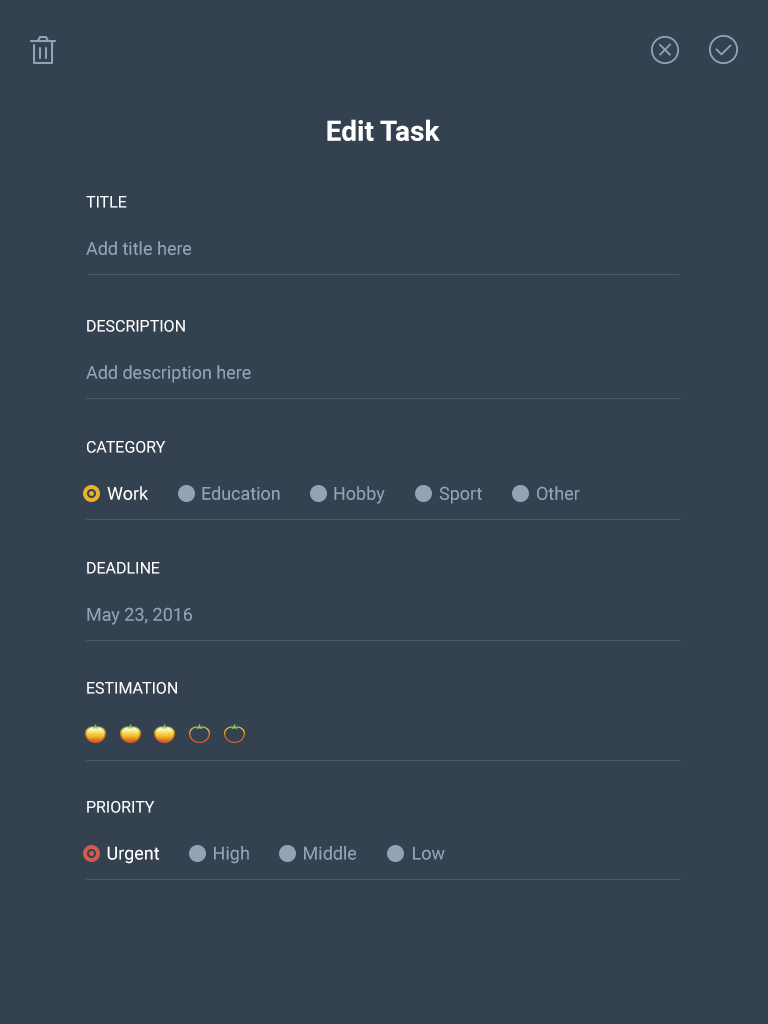
<style>
.page{position:relative;width:768px;height:1024px;background:#344150}
.page>*{position:absolute;margin:0}
.t1{font:28px "Roboto-Bold";color:#ffffff}
.t2{font:16px "Roboto-Regular";color:#ffffff;text-transform:uppercase}
.t3{font:18px "Roboto-Regular";color:#93a3b6}
.t4{font:18px "Roboto-Regular";color:#ffffff}
</style>
<div class="page">
<p class="t1" style="left:327px;top:119px;width:113px;height:22px">Edit Task</p>
<p class="t2" style="left:86px;top:196px;width:41px;height:12px">Title</p>
<p class="t3" style="left:86px;top:241px;width:105px;height:14px">Add title here</p>
<p class="t2" style="left:87px;top:320px;width:98px;height:12px">Description</p>
<p class="t3" style="left:86px;top:365px;width:165px;height:18px">Add description here</p>
<p class="t2" style="left:87px;top:441px;width:79px;height:12px">Category</p>
<p class="t4" style="left:107px;top:486px;width:41px;height:14px">Work</p>
<p class="t3" style="left:202px;top:486px;width:78px;height:14px">Education</p>
<p class="t3" style="left:334px;top:486px;width:51px;height:18px">Hobby</p>
<p class="t3" style="left:439px;top:486px;width:43px;height:18px">Sport</p>
<p class="t3" style="left:537px;top:486px;width:43px;height:14px">Other</p>
<p class="t2" style="left:87px;top:562px;width:73px;height:12px">Deadline</p>
<p class="t3" style="left:87px;top:607px;width:105px;height:18px">May 23, 2016</p>
<p class="t2" style="left:87px;top:682px;width:90px;height:12px">ESTIMATION</p>
<p class="t2" style="left:87px;top:801px;width:68px;height:12px">Priority</p>
<p class="t4" style="left:107px;top:846px;width:52px;height:18px">Urgent</p>
<p class="t3" style="left:214px;top:846px;width:35px;height:18px">High</p>
<p class="t3" style="left:304px;top:846px;width:52px;height:14px">Middle</p>
<p class="t3" style="left:413px;top:846px;width:32px;height:14px">Low</p>
</div>
